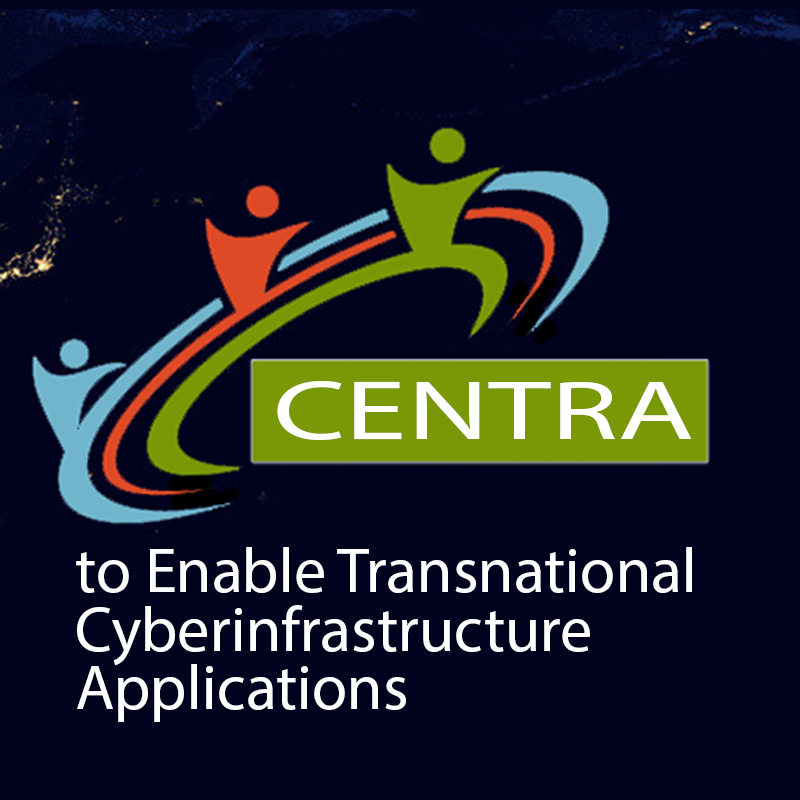
<style>
.page{position:relative;width:800px;height:800px;background:#01021e}
.page>*{position:absolute;margin:0}
.t1{font:84.3px "MyriadPro-Regular";color:#ffffff;scale:1.48 1}
.t2{font:64px/58.7px "MyriadPro-Regular";color:#ffffff}
</style>
<div class="page">
<p class="t1" style="left:277px;top:380px;width:415px;height:61px">CENTRA</p>
<p class="t2" style="left:76px;top:547px;width:616px;height:175px">to Enable Transnational<br>Cyberinfrastructure<br>Applications</p>
</div>
